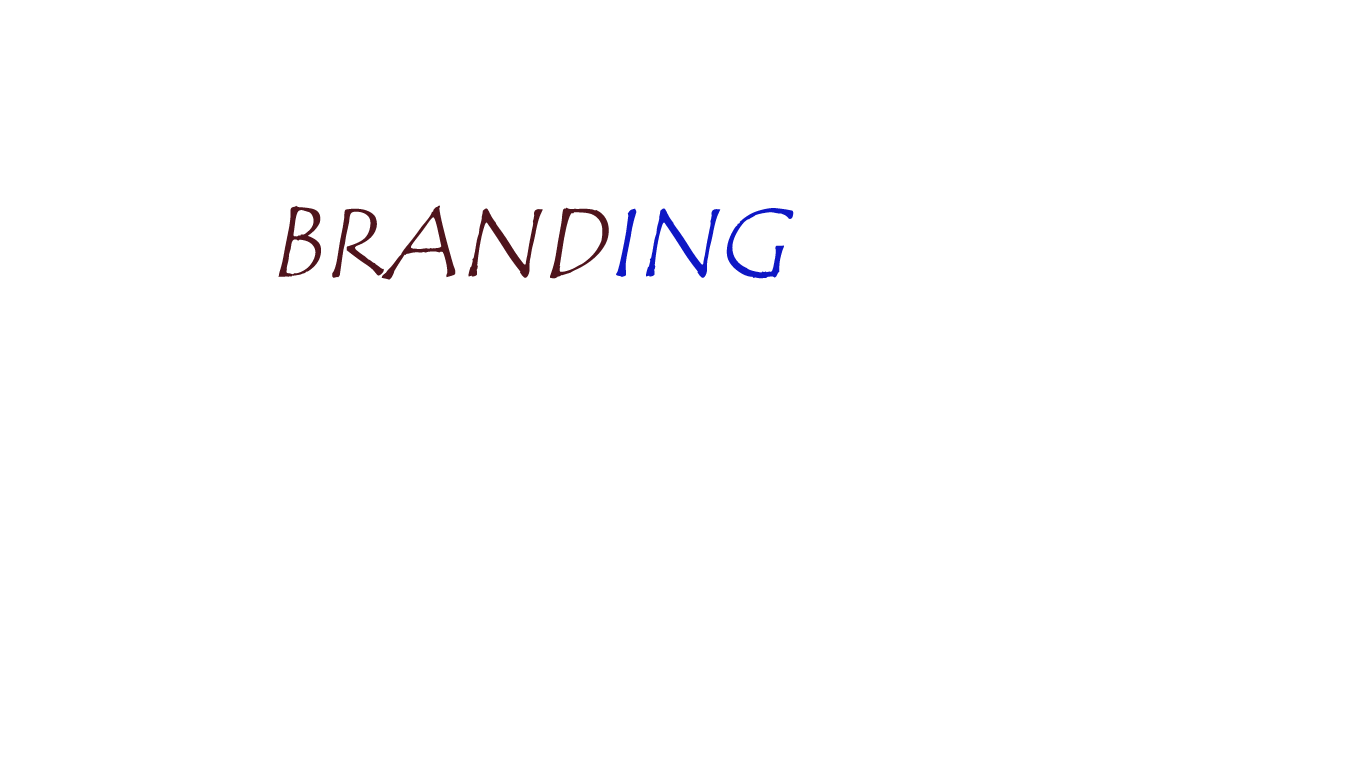
<style>
.page{position:relative;width:1366px;height:768px;background:#ffffff}
.page>*{position:absolute;margin:0}
.t1{font:100px "TempusSansITC";color:#4f141c;text-transform:uppercase;font-style:italic}
.t2{font:100px "TempusSansITC";color:#0e17c5;text-transform:uppercase;font-style:italic}
</style>
<div class="page">
<p class="t1" style="left:278px;top:205px;width:516px;height:75px">Brand<span class="t2">ing</span></p>
</div>
